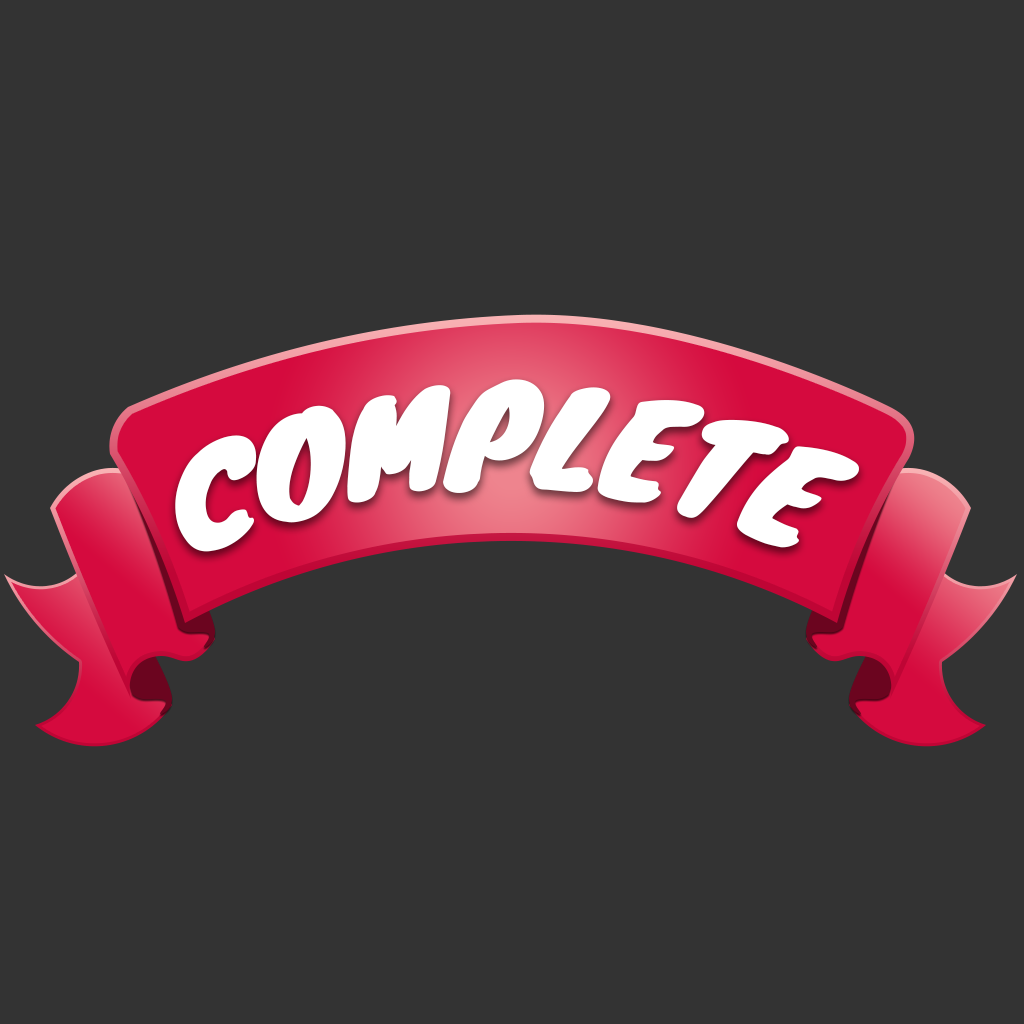
<style>
.page{position:relative;width:1024px;height:1024px;background:#333333}
.page>*{position:absolute;margin:0}
.t1{font:126.4px "Knewave-Regular";color:#ffffff}
</style>
<div class="page">
<p class="t1" style="left:175px;top:379px;width:684px;height:173px">COMPLETE</p>
</div>
